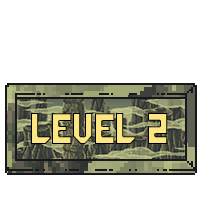
<style>
.page{position:relative;width:200px;height:200px;background:#ffffff}
.page>*{position:absolute;margin:0}
.t1{font:34.9px "GalacticaGridRegular";color:#fce583;scale:0.97 1}
</style>
<div class="page">
<p class="t1" style="left:31px;top:113px;width:137px;height:31px">Level 2</p>
</div>
